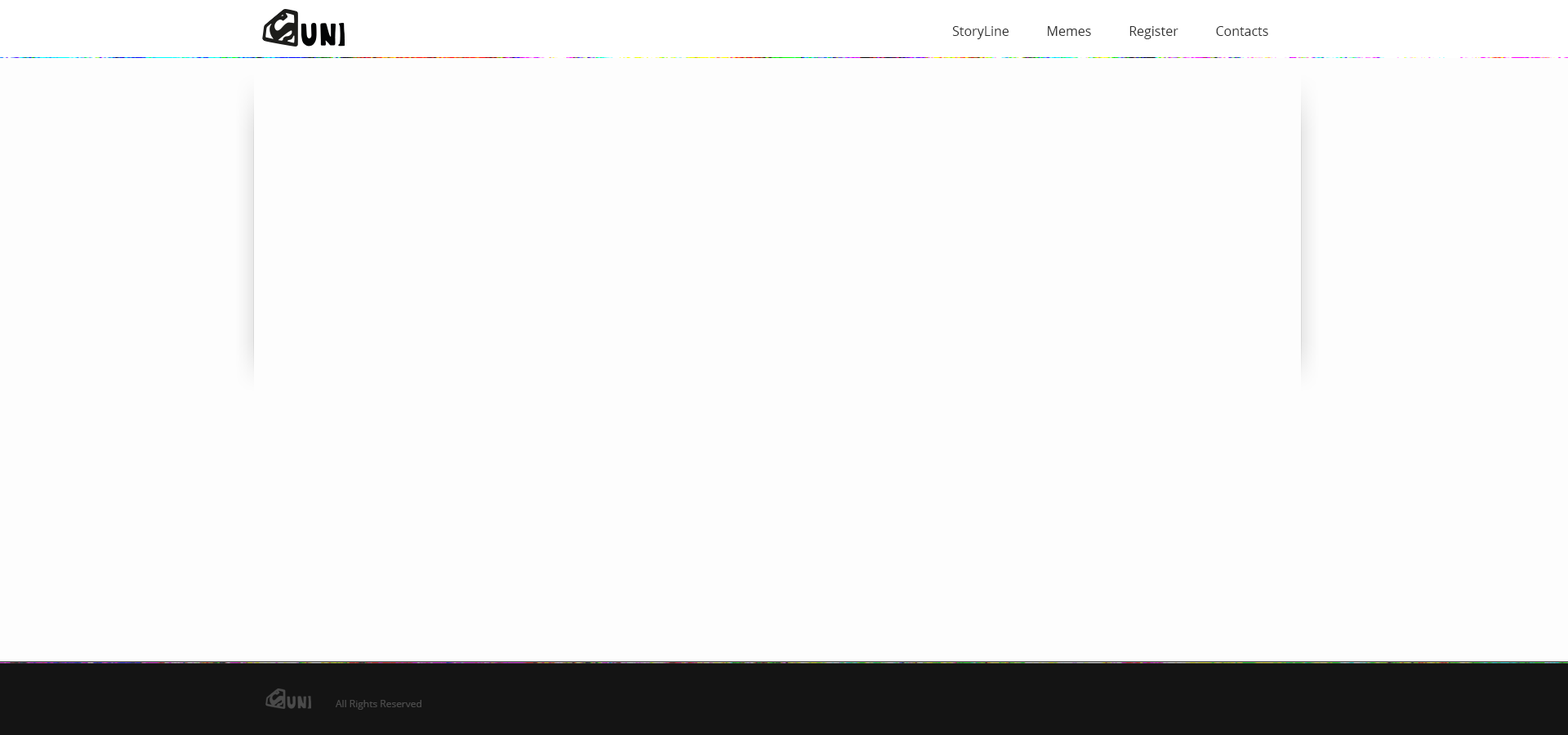
<style>
.page{position:relative;width:1568px;height:735px;background:#fdfdfd}
.page>*{position:absolute;margin:0}
.t1{font:13.1px "OpenSans";color:#303030}
.t2{font:9.8px "OpenSans";color:#4a4a4a}
</style>
<div class="page">
<p class="t1" style="left:952px;top:26px;width:316px;height:13px">StoryLine           Memes           Register           Contacts</p>
<p class="t2" style="left:336px;top:700px;width:85px;height:10px">All Rights Reserved</p>
</div>
